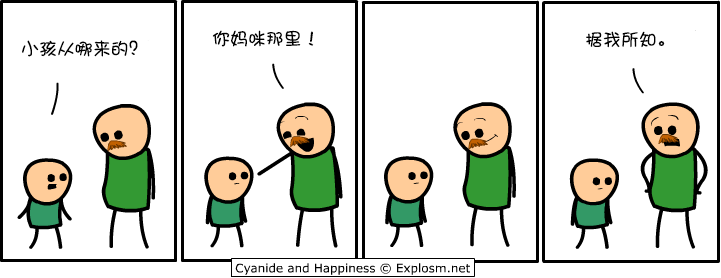
<style>
.page{position:relative;width:721px;height:278px;background:#ffffff}
.page>*{position:absolute;margin:0}
.t1{font:18px "DFPShaoNvW5";color:#000000}
</style>
<div class="page">
<p class="t1" style="left:212px;top:30px;width:102px;height:17px">你妈咪那里！</p>
<p class="t1" style="left:22px;top:40px;width:116px;height:17px">小孩从哪来的？</p>
<p class="t1" style="left:586px;top:31px;width:79px;height:17px">据我所知。</p>
</div>
